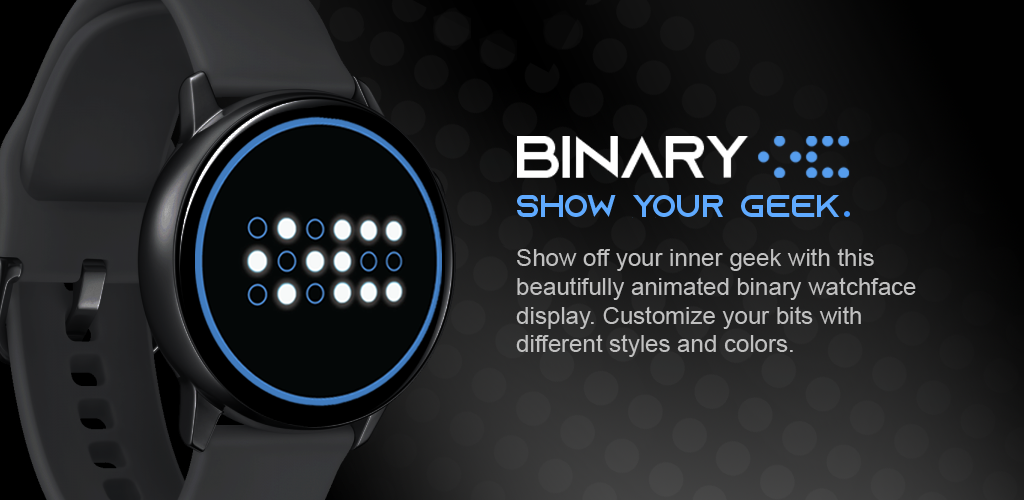
<style>
.page{position:relative;width:1024px;height:500px}
.page>*{position:absolute;margin:0}
.t1{font:31.7px "AzonixRegular";color:#5faaff}
.t2{font:24px "ArialMT";color:#c9c9c9}
</style>
<div class="page">
<p class="t1" style="left:517px;top:195px;width:323px;height:23px">SHOW YOUR GEEK</p>
<p class="t2" style="left:516px;top:248px;width:400px;height:109px">Show off your inner geek with this <br>beautifully animated binary watchface <br>display. Customize your bits with <br>different styles and colors.</p>
</div>
